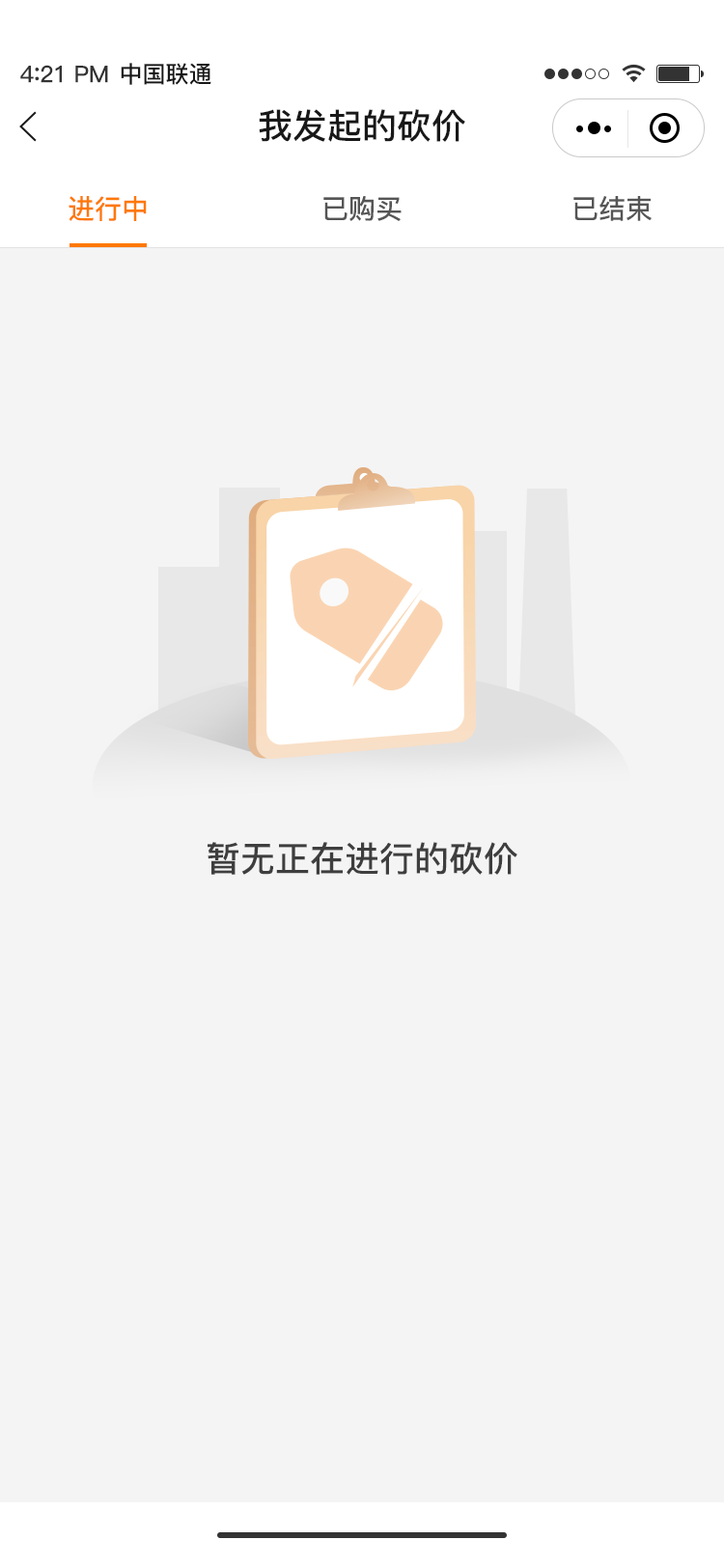
<style>
.page{position:relative;width:724px;height:1568px;background:#f4f4f4}
.page>*{position:absolute;margin:0}
.t1{font:23.2px "PingFang-SC-Bold";letter-spacing:-0.02em;color:#333333}
.t2{font:25.1px "PingFang-SC-Bold";letter-spacing:-0.02em;color:#333333}
.t3{font:23.2px "PingFang-SC-Bold";color:#181818}
.t4{font:34.8px "PingFang-SC-Bold";color:#181818}
.t5{font:27px "PingFang-SC-Bold";color:#ff7800}
.t6{font:27px "PingFang-SC-Bold";color:#555555}
.t7{font:34.8px "PingFang-SC-Bold";color:#3e3e3e}
</style>
<div class="page">
<p class="t1" style="left:20px;top:65px;width:88px;height:18px">4<span class="t2">:</span>21 PM</p>
<p class="t3" style="left:121px;top:63px;width:90px;height:22px">中国联通</p>
<p class="t4" style="left:259px;top:109px;width:206px;height:33px">我发起的砍价</p>
<p class="t5" style="left:69px;top:196px;width:78px;height:25px">进行中</p>
<p class="t6" style="left:323px;top:196px;width:79px;height:25px">已购买</p>
<p class="t6" style="left:574px;top:196px;width:78px;height:25px">已结束</p>
<p class="t7" style="left:208px;top:842px;width:310px;height:33px">暂无正在进行的砍价</p>
</div>
